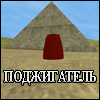
<style>
.page{position:relative;width:100px;height:100px}
.page>*{position:absolute;margin:0}
.t1{font:17.1px "TimesNewRomanPS-BoldMT";color:#f0f0f0;scale:0.7 1}
</style>
<div class="page">
<p class="t1" style="left:4px;top:71px;width:92px;height:14px">ПОДЖИГАТЕЛЬ</p>
</div>
